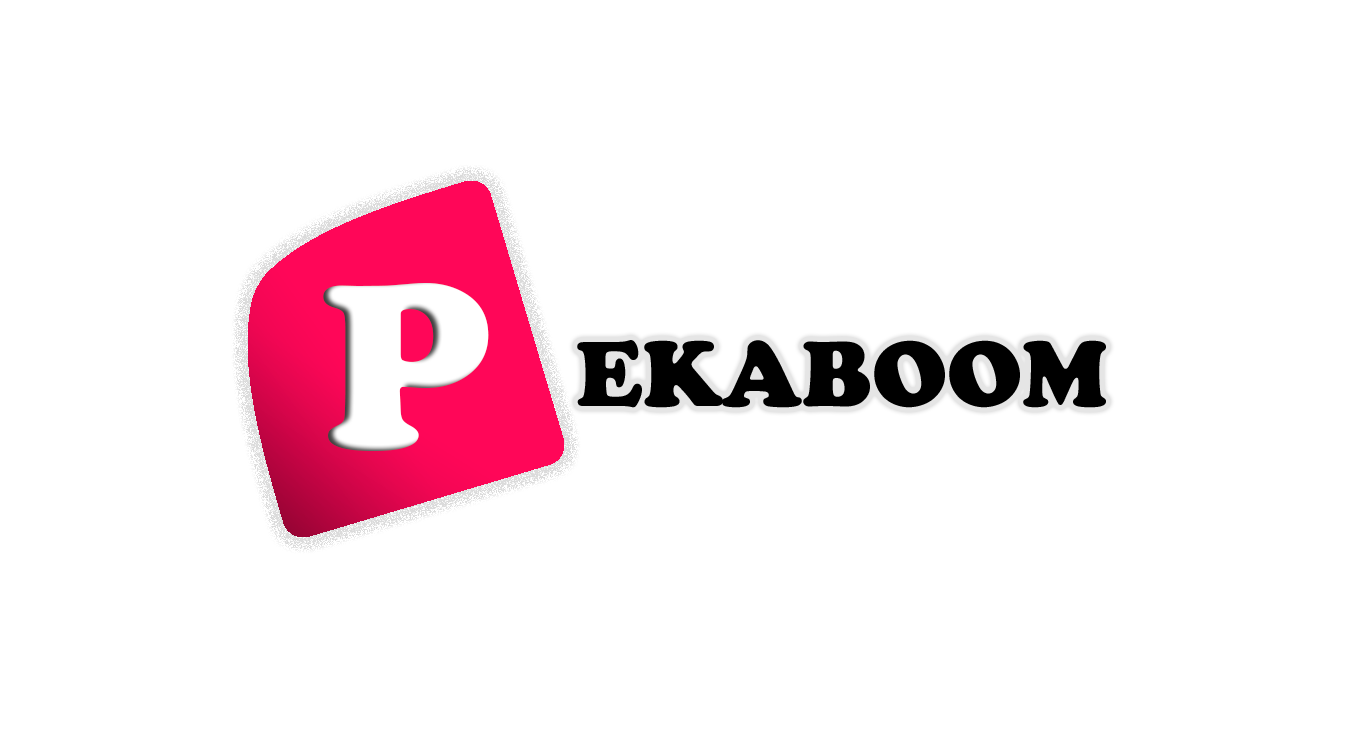
<style>
.page{position:relative;width:1366px;height:750px;background:#ffffff}
.page>*{position:absolute;margin:0}
.t1{font:246px "CooperBlack";color:#ffffff}
.t2{font:96.4px "CooperBlack";color:#000000}
</style>
<div class="page">
<p class="t1" style="left:323px;top:283px;width:166px;height:168px">P</p>
<p class="t2" style="left:577px;top:340px;width:529px;height:68px">EKABOOM</p>
</div>
